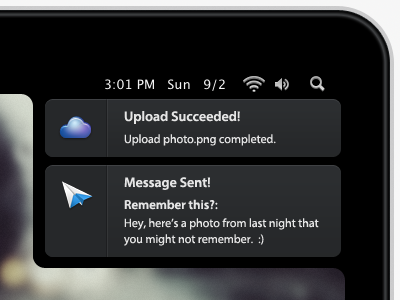
<style>
.page{position:relative;width:400px;height:300px;background:#000000}
.page>*{position:absolute;margin:0}
.t1{font:12px/22px "MyriadPro-Regular";color:#e5e5e5}
.t2{font:14px "MyriadPro-Semibold";color:#e5e5e5}
.t3{font:12px/18px "MyriadPro-Regular";color:#e5e5e5}
.t4{font:13px/22px "MyriadPro-Semibold";color:#e5e5e5}
.t5{font:12px/16px "MyriadPro-Regular";color:#e5e5e5}
</style>
<div class="page">
<p class="t1" style="left:124px;top:111px;width:152px;height:35px"><span class="t2">Upload Succeeded!<br></span>Upload photo.png completed.</p>
<p class="t3" style="left:124px;top:177px;width:195px;height:69px"><span class="t2">Message Sent!<br></span><span class="t4">Remember this?:<br></span>Hey, here’s a photo from last night <span class="t5">that <br>you might not remember.  :)</span></p>
</div>
